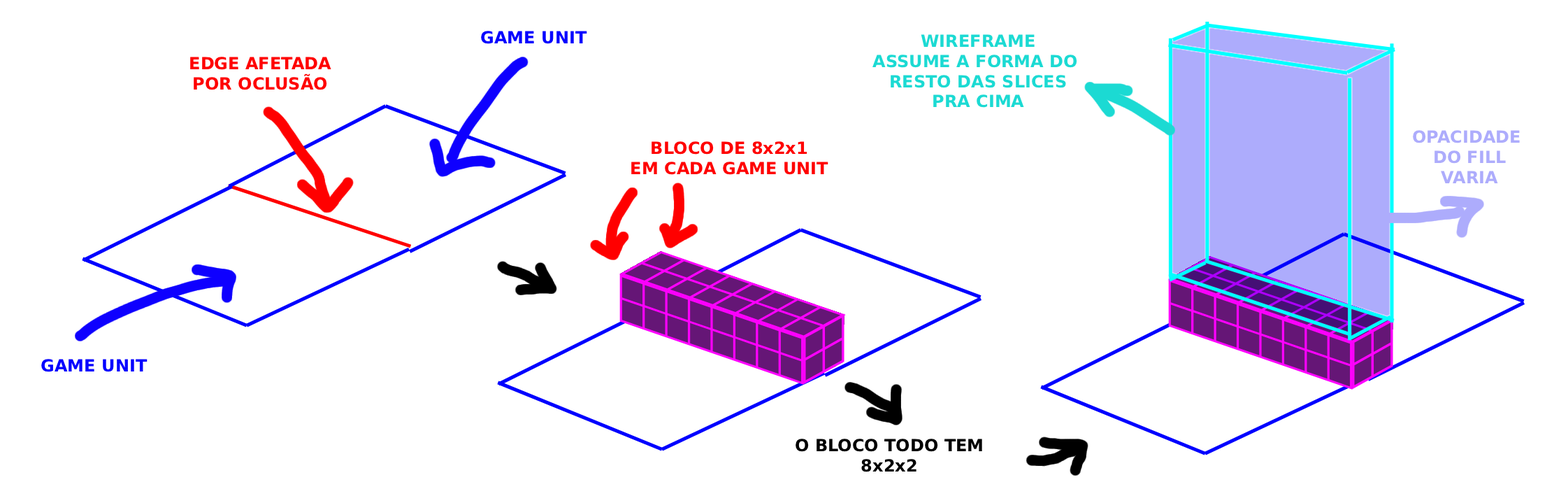
<style>
.page{position:relative;width:1568px;height:496px;background:#ffffff}
.page>*{position:absolute;margin:0}
.t1{font:16.8px "DejaVuSans-Bold";color:#0400ff}
.t2{font:16.8px "DejaVuSans-Bold";color:#1bdad3}
.t3{font:16.8px "DejaVuSans-Bold";color:#ff0000}
.t4{font:16.8px "DejaVuSans-Bold";color:#adacfc}
.t5{font:16.8px "DejaVuSans-Bold";color:#000000}
</style>
<div class="page">
<p class="t1" style="left:481px;top:31px;width:106px;height:13px">GAME UNIT</p>
<p class="t2" style="left:872px;top:34px;width:205px;height:74px;text-align:center">WIREFRAME<br>ASSUME A FORMA DO <br>RESTO DAS SLICES<br>PRA CIMA</p>
<p class="t3" style="left:190px;top:57px;width:141px;height:33px;text-align:center">EDGE AFETADA<br>POR OCLUSÃO</p>
<p class="t4" style="left:1413px;top:130px;width:107px;height:53px;text-align:center">OPACIDADE <br>DO FILL<br>VARIA</p>
<p class="t3" style="left:631px;top:141px;width:197px;height:34px;text-align:center">BLOCO DE 8x2x1<br>EM CADA GAME UNIT</p>
<p class="t1" style="left:41px;top:359px;width:107px;height:13px">GAME UNIT</p>
<p class="t5" style="left:796px;top:438px;width:186px;height:34px;text-align:center">O BLOCO TODO TEM<br>8x2x2</p>
</div>
